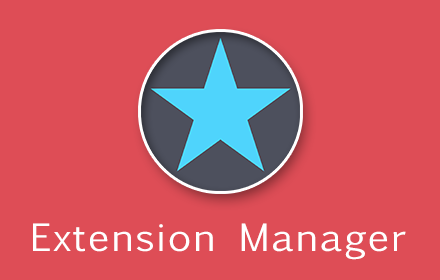
<style>
.page{position:relative;width:440px;height:280px;background:#de4d56}
.page>*{position:absolute;margin:0}
.t1{font:36px "EuphemiaUCAS";letter-spacing:0.04em;color:#ffffff;scale:1.1 1}
</style>
<div class="page">
<p class="t1" style="left:33px;top:223px;width:373px;height:37px">Extension Manager</p>
</div>
